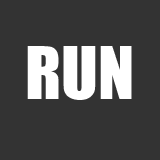
<style>
.page{position:relative;width:160px;height:160px;background:#333333}
.page>*{position:absolute;margin:0}
.t1{font:67px "Impact";color:#ffffff;text-transform:uppercase}
</style>
<div class="page">
<p class="t1" style="left:27px;top:46px;width:105px;height:54px">RUN</p>
</div>
